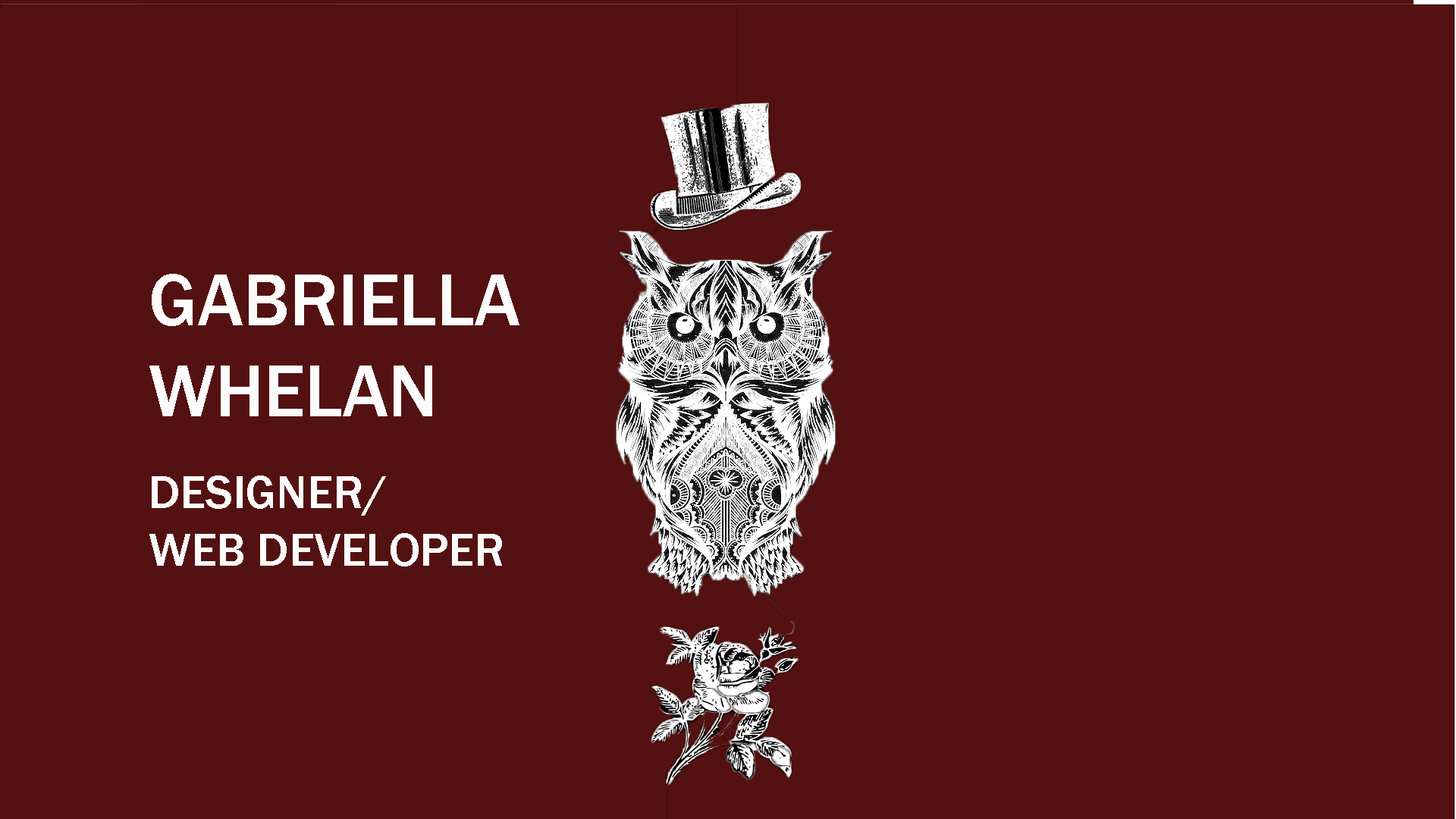
<style>
.page{position:relative;width:1456px;height:819px;background:#541111}
.page>*{position:absolute;margin:0}
.t1{font:75.8px "FranklinGothic-Medium";color:#fcfcfc}
.t2{font:47.8px "FranklinGothic-Medium";color:#fcfcfc}
</style>
<div class="page">
<p class="t1" style="left:149px;top:274px;width:370px;height:142px">GABRIELLA WHELAN</p>
<p class="t2" style="left:149px;top:475px;width:353px;height:91px">DESIGNER/<br>WEB DEVELOPER</p>
</div>
